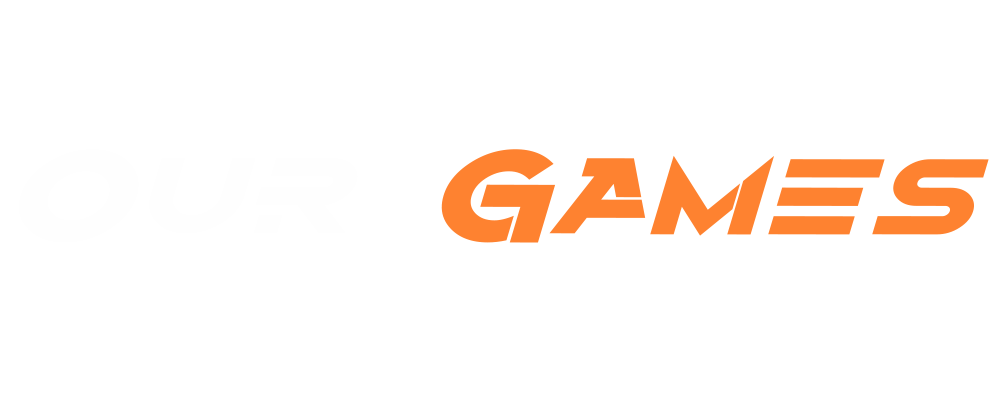
<style>
.page{position:relative;width:1000px;height:400px;background:#ffffff}
.page>*{position:absolute;margin:0}
.t1{font:132.7px "Alternity-BoldItalic";color:#fe8230;scale:1.24 1}
.t2{font:132.7px "Alternity-BoldItalic";color:#fefefe;scale:1.24 1}
</style>
<div class="page">
<p class="t1" style="left:18px;top:149px;width:971px;height:94px"><span class="t2">Our</span> Games</p>
</div>
